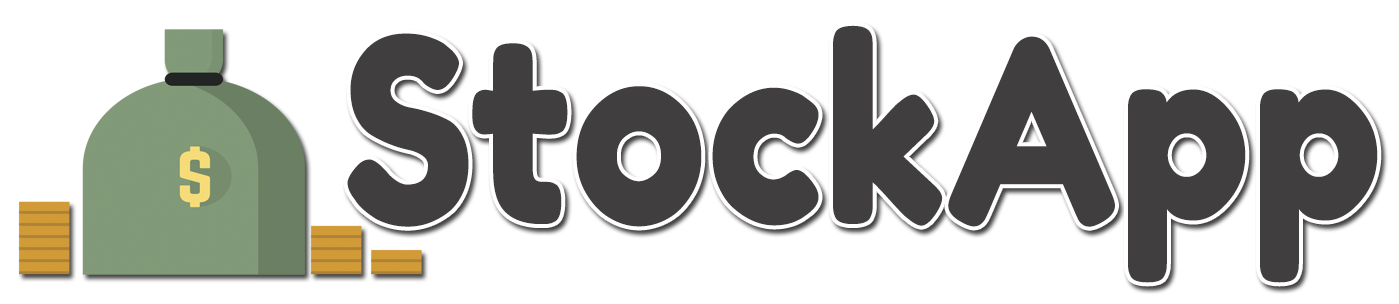
<style>
.page{position:relative;width:1399px;height:304px;background:#ffffff}
.page>*{position:absolute;margin:0}
.t1{font:255.6px "FredokaOne-Regular";color:#403e3e;scale:0.89 1}
</style>
<div class="page">
<p class="t1" style="left:347px;top:25px;width:1031px;height:258px">StockApp</p>
</div>
